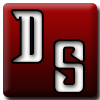
<style>
.page{position:relative;width:100px;height:100px}
.page>*{position:absolute;margin:0}
.t1{font:62.4px/30px "DragonForcE";font-weight:bold}
</style>
<div class="page">
<p class="t1" style="left:12px;top:11px;width:71px;height:81px">D<br>S</p>
</div>
